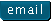
<style>
.page{position:relative;width:52px;height:22px;background:#045975}
.page>*{position:absolute;margin:0}
.t1{font:13px "LucidaSansUnicode";letter-spacing:0.05em;color:#ffffff}
</style>
<div class="page">
<p class="t1" style="left:8px;top:4px;width:34px;height:10px">email</p>
</div>
